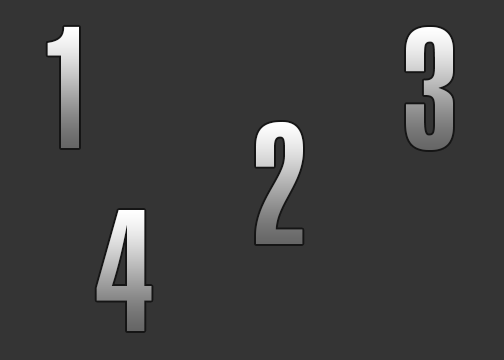
<style>
.page{position:relative;width:504px;height:360px;background:#343434}
.page>*{position:absolute;margin:0}
.t1{font:170px "Helvetica-UltraCompressed"}
</style>
<div class="page">
<p class="t1" style="left:47px;top:26px;width:32px;height:122px">1</p>
<p class="t1" style="left:406px;top:26px;width:47px;height:124px">3</p>
<p class="t1" style="left:256px;top:121px;width:47px;height:123px">2</p>
<p class="t1" style="left:96px;top:210px;width:56px;height:121px">4</p>
</div>
